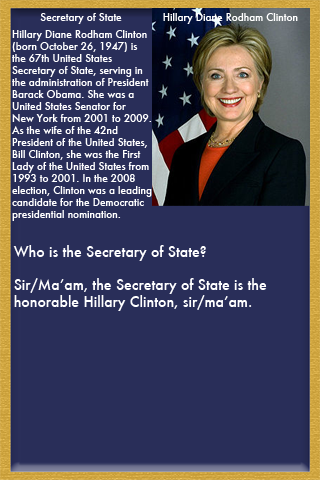
<style>
.page{position:relative;width:320px;height:480px;background:#292e59}
.page>*{position:absolute;margin:0}
.t1{font:10px "Futura-Medium";color:#ffffff}
.t2{font:14px "Futura-Medium";color:#ffffff}
</style>
<div class="page">
<p class="t1" style="left:40px;top:13px;width:82px;height:11px">Secretary of State</p>
<p class="t1" style="left:163px;top:13px;width:135px;height:11px">Hillary Diane Rodham Clinton</p>
<p class="t1" style="left:11px;top:30px;width:141px;height:191px">Hillary Diane Rodham Clinton <br>(born October 26, 1947) is <br>the 67th United States <br>Secretary of State, serving in <br>the administration of President <br>Barack Obama. She was a <br>United States Senator for <br>New York from 2001 to 2009. <br>As the wife of the 42nd <br>President of the United States, <br>Bill Clinton, she was the First <br>Lady of the United States from <br>1993 to 2001. In the 2008 <br>election, Clinton was a leading <br>candidate for the Democratic <br>presidential nomination.</p>
<p class="t2" style="left:13px;top:245px;width:254px;height:66px">Who is the Secretary of State?<br><br>Sir/Ma’am, the Secretary of State is the <br>honorable Hillary Clinton, sir/ma’am.</p>
</div>
